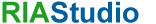
<style>
.page{position:relative;width:156px;height:24px;background:#ffffff}
.page>*{position:absolute;margin:0}
.t1{font:28.8px "Arial-BoldMT";color:#1f9f1f}
.t2{font:28.8px "Arial-BoldMT";color:#005f9f}
</style>
<div class="page">
<p class="t1" style="left:2px;top:1px;width:48px;height:22px">RIA</p>
<p class="t2" style="left:51px;top:1px;width:88px;height:22px">Studio</p>
</div>
